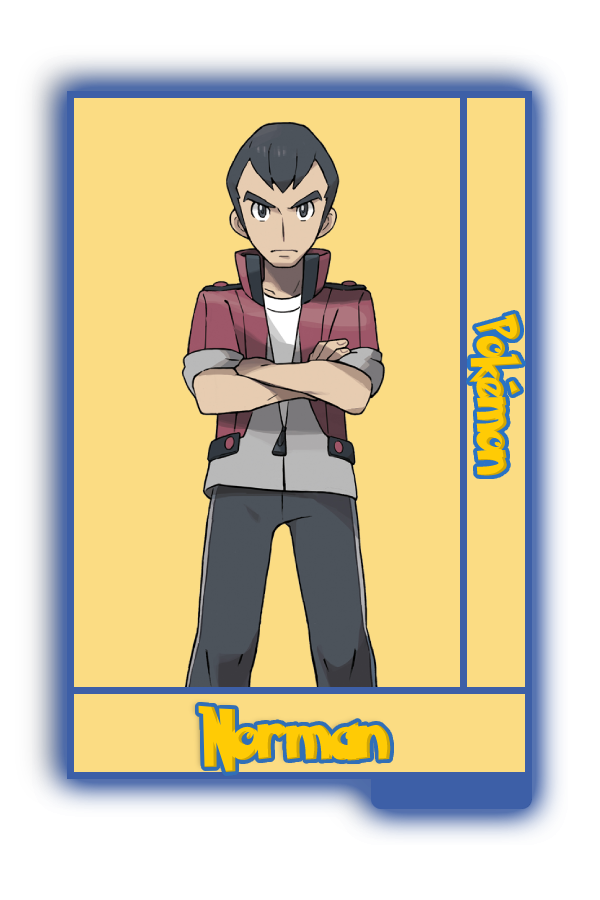
<style>
.page{position:relative;width:600px;height:900px;background:#fbdc83}
.page>*{position:absolute;margin:0}
.t1{font:48.8px "PokemonSolidNormal";color:#ffcb05;scale:0.8 1}
.t2{font:56.6px "PokemonSolidNormal";color:#ffcb05;scale:0.92 1}
</style>
<div class="page">
<p class="t1" style="left:469px;top:313px;width:54px;height:163px;rotate:90deg">Pokémon</p>
<p class="t2" style="left:198px;top:705px;width:193px;height:67px">Norman</p>
</div>
